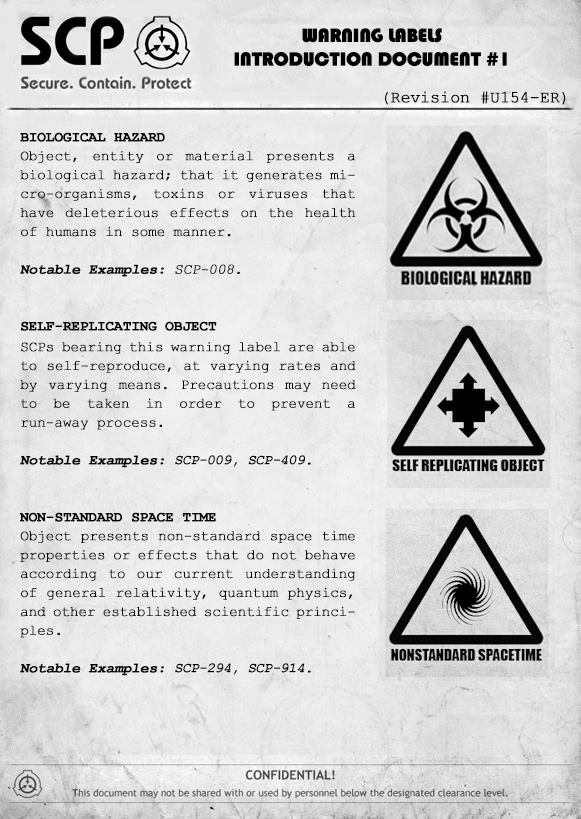
<style>
.page{position:relative;width:581px;height:819px}
.page>*{position:absolute;margin:0}
.t1{font:19.7px/23.6px "Bauhaus93";letter-spacing:-0.025em;color:#000000;text-transform:uppercase;font-weight:bold}
.t2{font:16.5px "CourierNewPSMT";letter-spacing:-0.025em;color:#000000;font-weight:bold}
.t3{font:14.2px/18.9px "CourierNewPSMT";letter-spacing:-0.025em;color:#000000;font-weight:bold}
.t4{font:14.2px/18.9px "CourierNewPS-BoldMT";letter-spacing:-0.025em;color:#000000;text-transform:uppercase;font-weight:bold}
.t5{font:14.2px/18.9px "CourierNewPS-BoldMT";letter-spacing:-0.025em;color:#000000;font-weight:bold;font-style:italic}
.t6{font:14.2px/18.9px "CourierNewPSMT";letter-spacing:-0.025em;color:#000000;font-weight:bold;font-style:italic}
.t7{font:14.2px "CourierNewPS-BoldMT";letter-spacing:-0.025em;color:#000000;text-transform:uppercase;font-weight:bold}
.t8{font:14.2px/18.9px "CourierNewPS-BoldMT";letter-spacing:-0.025em;color:#000000;font-style:italic}
</style>
<div class="page">
<p class="t1" style="left:234px;top:28px;width:273px;height:38px;text-align:center">Warning Labels <br>Introduction Document #1</p>
<p class="t2" style="left:385px;top:91px;width:181px;height:14px">(Revision #U154-ER)</p>
<p class="t3" style="left:20px;top:132px;width:336px;height:145px;text-align:justify"><span class="t4">Biological Hazard<br></span>Object, entity or material presents a biological hazard; that it generates micro-organisms, toxins or viruses that have deleterious effects on the health of humans in some manner.<br><br><span class="t5">Notable Examples:</span><span class="t6"> SCP-008.</span></p>
<p class="t7" style="left:21px;top:321px;width:196px;height:10px">self-replicating object</p>
<p class="t3" style="left:20px;top:342px;width:336px;height:126px;text-align:justify">SCPs bearing this warning label are able to self-reproduce, at varying rates and by varying means. Precautions may need to be taken in order to prevent a run-away process.<br><br><span class="t5">Notable Examples: </span><span class="t8">SCP-009, SCP-409</span><span class="t5">.</span></p>
<p class="t3" style="left:19px;top:512px;width:337px;height:164px;text-align:justify"><span class="t4">non-standard space time<br></span>Object presents non-standard space time properties or effects that do not behave according to our current understanding of general relativity, quantum physics, and other established scientific principles.<br><br><span class="t5">Notable Examples: </span><span class="t8">SCP-294, SCP-914</span><span class="t5">.</span></p>
</div>
